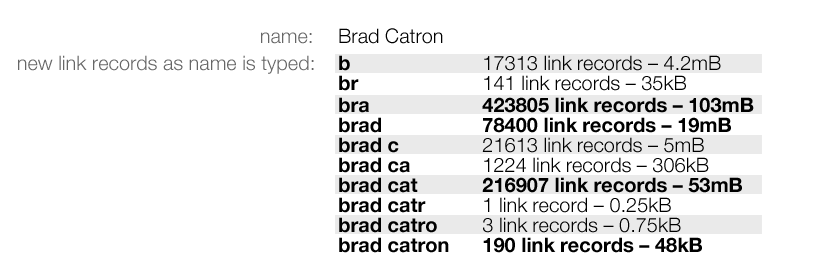
<style>
.page{position:relative;width:819px;height:280px;background:#ffffff}
.page>*{position:absolute;margin:0}
.t1{font:20px "HelveticaNeue-Light";color:#000000}
.t2{font:20px "HelveticaNeue-Light";color:#666666}
.t3{font:20px "HelveticaNeue-Bold";color:#000000}
</style>
<div class="page">
<p class="t1" style="left:339px;top:28px;width:104px;height:16px">Brad Catron</p>
<p class="t2" style="left:261px;top:32px;width:51px;height:12px">name:</p>
<p class="t2" style="left:18px;top:55px;width:296px;height:19px">new link records as name is typed:</p>
<p class="t1" style="left:339px;top:55px;width:382px;height:16px"><span class="t3">b</span>     17313 link records – 4.2mB</p>
<p class="t1" style="left:339px;top:75px;width:347px;height:16px"><span class="t3">br</span>    141 link records – 35kB</p>
<p class="t3" style="left:339px;top:97px;width:415px;height:16px">bra    423805 link records – 103mB</p>
<p class="t3" style="left:339px;top:117px;width:392px;height:16px">brad   78400 link records – 19mB</p>
<p class="t1" style="left:339px;top:137px;width:365px;height:16px"><span class="t3">brad c</span>   21613 link records – 5mB</p>
<p class="t1" style="left:339px;top:157px;width:370px;height:16px"><span class="t3">brad ca  </span>1224 link records – 306kB</p>
<p class="t3" style="left:339px;top:177px;width:403px;height:16px">brad cat  216907 link records – 53mB</p>
<p class="t1" style="left:339px;top:197px;width:332px;height:16px"><span class="t3">brad catr  </span>1 link record – 0.25kB</p>
<p class="t1" style="left:339px;top:217px;width:342px;height:16px"><span class="t3">brad catro  </span>3 link records – 0.75kB</p>
<p class="t3" style="left:339px;top:237px;width:363px;height:16px">brad catron 190 link records – 48kB</p>
</div>
